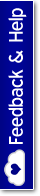
<style>
.page{position:relative;width:40px;height:196px}
.page>*{position:absolute;margin:0}
.t1{font:20px "ExpresswayRg-Regular";color:#ffffff}
</style>
<div class="page">
<p class="t1" style="left:8px;top:8px;width:19px;height:136px;rotate:-90deg">Feedback &amp; Help</p>
</div>
